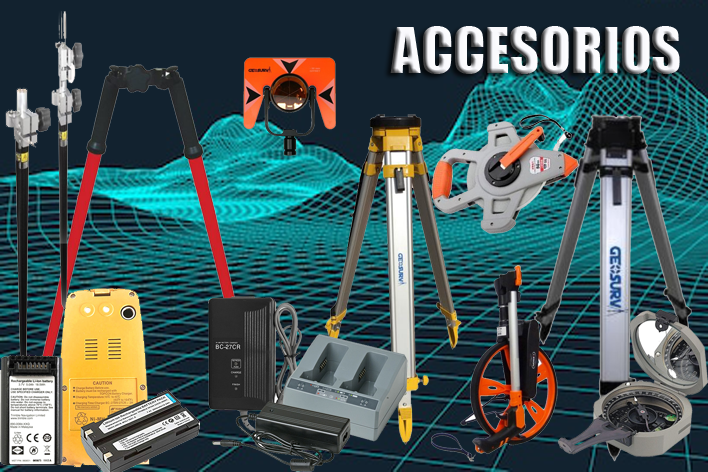
<style>
.page{position:relative;width:708px;height:472px}
.page>*{position:absolute;margin:0}
.t1{font:58.3px "Impact"}
</style>
<div class="page">
<p class="t1" style="left:390px;top:26px;width:290px;height:48px">ACCESORIOS</p>
</div>
